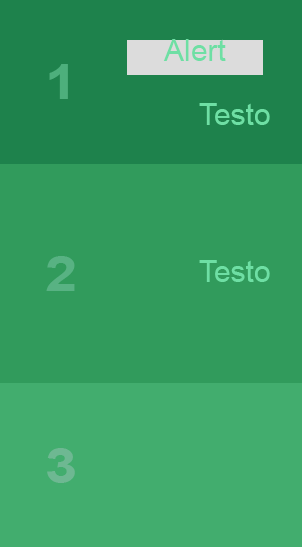
<style>
.page{position:relative;width:302px;height:547px;background:#319b5c}
.page>*{position:absolute;margin:0}
.t1{font:30px "ArialMT";color:#6edfa4}
.t2{font:48px "Arial-BoldMT";color:#4daf7c;scale:1.2 1}
.t3{font:48px "Arial-BoldMT";color:#58b283;scale:1.2 1}
.t4{font:48px "Arial-BoldMT";color:#6eb892;scale:1.2 1}
</style>
<div class="page">
<p class="t1" style="left:163px;top:39px;width:63px;height:22px">Alert</p>
<p class="t2" style="left:49px;top:64px;width:19px;height:35px">1</p>
<p class="t1" style="left:199px;top:103px;width:71px;height:22px">Testo</p>
<p class="t3" style="left:46px;top:256px;width:29px;height:35px">2</p>
<p class="t1" style="left:199px;top:260px;width:71px;height:22px">Testo</p>
<p class="t4" style="left:47px;top:448px;width:28px;height:35px">3</p>
</div>
